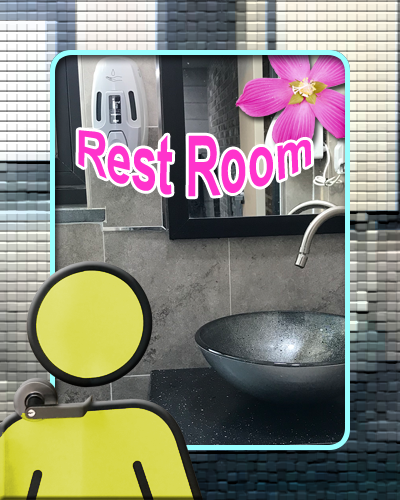
<style>
.page{position:relative;width:400px;height:500px}
.page>*{position:absolute;margin:0}
.t1{font:45px "Arial-BoldMT";color:#ff33cc}
</style>
<div class="page">
<p class="t1" style="left:78px;top:130px;width:233px;height:67px">Rest Room</p>
</div>
